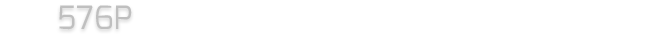
<style>
.page{position:relative;width:648px;height:35px;background:#ffffff}
.page>*{position:absolute;margin:0}
.t1{font:32px "Exo-Regular";color:#bfbfbf;text-transform:uppercase}
</style>
<div class="page">
<p class="t1" style="left:59px;top:5px;width:73px;height:25px">576p</p>
</div>
